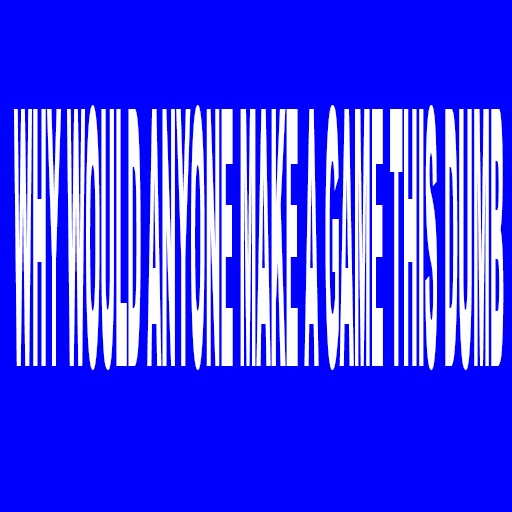
<style>
.page{position:relative;width:512px;height:512px;background:#0000ff}
.page>*{position:absolute;margin:0}
.t1{font:358.9px "Arial-Black";color:#ffffff;scale:0.05 1}
</style>
<div class="page">
<p class="t1" style="left:14px;top:105px;width:490px;height:265px">WHY WOULD ANYONE MAKE A GAME THIS DUMB</p>
</div>
